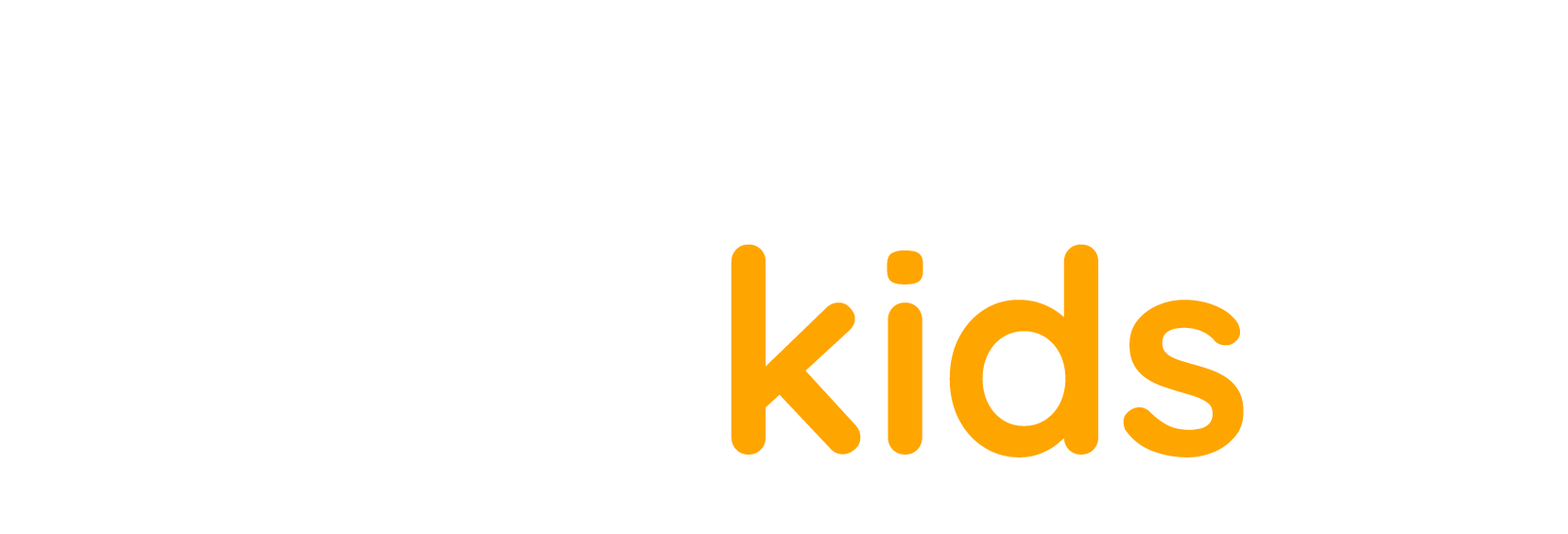
<style>
.page{position:relative;width:1568px;height:534px;background:#ffffff}
.page>*{position:absolute;margin:0}
.t1{font:283.5px "Quicksand-Bold";color:#ffa500}
</style>
<div class="page">
<p class="t1" style="left:731px;top:244px;width:513px;height:213px">kids</p>
</div>
